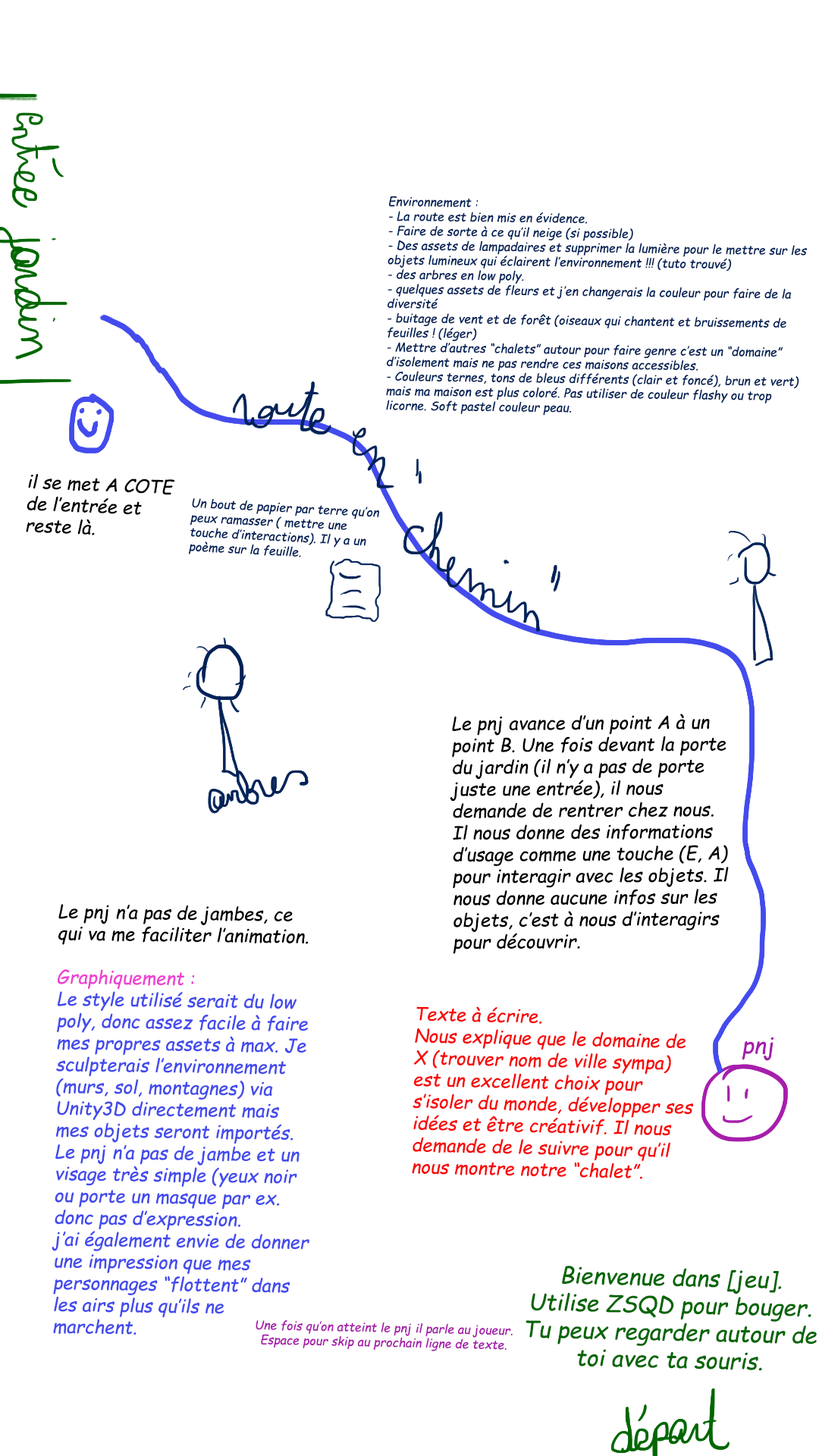
<style>
.page{position:relative;width:819px;height:1456px;background:#ffffff}
.page>*{position:absolute;margin:0}
.t1{font:12.1px "ComicSansMS-Italic";color:#002157}
.t2{font:18.2px "ComicSansMS-Italic";color:#000000}
.t3{font:18.2px "ComicSansMS-Italic";color:#434bed}
.t4{font:18.2px "ComicSansMS-Italic";color:#ed43d3}
.t5{font:18.2px "ComicSansMS-Italic";color:#f90808}
.t6{font:22.7px "ComicSansMS-Italic";color:#a61eab}
.t7{font:22.7px "ComicSansMS-Italic";color:#006600}
.t8{font:12.1px "ComicSansMS-Italic";color:#a61eab}
</style>
<div class="page">
<p class="t1" style="left:386px;top:196px;width:421px;height:220px;rotate:1deg">Environnement :<br>- La route est bien mis en évidence. <br>- Faire de sorte à ce qu’il neige (si possible)<br>- Des assets de lampadaires et supprimer la lumière pour le mettre sur les objets lumineux qui éclairent l’environnement !!! (tuto trouvé)<br>- des arbres en low poly. <br>- quelques assets de fleurs et j’en changerais la couleur pour faire de la diversité<br>- buitage de vent et de forêt (oiseaux qui chantent et bruissements de feuilles ! (léger)<br>- Mettre d’autres “chalets” autour pour faire genre c’est un “domaine” d’isolement mais ne pas rendre ces maisons accessibles. <br>- Couleurs ternes, tons de bleus différents (clair et foncé), brun et vert) mais ma maison est plus coloré. Pas utiliser de couleur flashy ou trop licorne. Soft pastel couleur peau.</p>
<p class="t2" style="left:26px;top:473px;width:149px;height:62px;rotate:2deg">il se met A COTE de l’entrée et reste là.</p>
<p class="t1" style="left:189px;top:498px;width:190px;height:59px;rotate:3deg">Un bout de papier par terre qu’on peux ramasser ( mettre une touche d’interactions). Il y a un poème sur la feuille.</p>
<p class="t2" style="left:450px;top:714px;width:279px;height:240px">Le pnj avance d’un point A à un point B. Une fois devant la porte du jardin (il n’y a pas de porte juste une entrée), il nous demande de rentrer chez nous. Il nous donne des informations d’usage comme une touche (E, A) pour interagir avec les objets. Il nous donne aucune infos sur les objets, c’est à nous d’interagirs pour découvrir.</p>
<p class="t3" style="left:52px;top:904px;width:257px;height:431px;rotate:1deg"><span class="t2">Le pnj n’a pas de jambes, ce qui va me faciliter l’animation. <br><br></span><span class="t4">Graphiquement :<br></span>Le style utilisé serait du low poly, donc assez facile à faire mes propres assets à max. Je sculpterais l’environnement (murs, sol, montagnes) via Unity3D directement mais mes objets seront importés. <br>Le pnj n’a pas de jambe et un visage très simple (yeux noir ou porte un masque par ex. donc pas d’expression. <br>j’ai également envie de donner une impression que mes personnages “flottent” dans les airs plus qu’ils ne marchent.</p>
<p class="t5" style="left:412px;top:1006px;width:281px;height:173px;rotate:1deg">Texte à écrire.<br>Nous explique que le domaine de X (trouver nom de ville sympa) est un excellent choix pour s’isoler du monde, développer ses idées et être créativif. Il nous demande de le suivre pour qu’il nous montre notre “chalet”.</p>
<p class="t6" style="left:742px;top:1037px;width:32px;height:24px;rotate:1deg">pnj</p>
<p class="t7" style="left:526px;top:1266px;width:291px;height:105px;rotate:1deg">Bienvenue dans [jeu]. Utilise ZSQD pour bouger. Tu peux regarder autour de toi avec ta souris.</p>
<p class="t8" style="left:256px;top:1320px;width:257px;height:31px;rotate:1deg">Une fois qu’on atteint le pnj il parle au joueur. Espace pour skip au prochain ligne de texte.</p>
</div>
